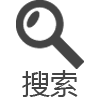
<style>
.page{position:relative;width:100px;height:100px;background:#ffffff}
.page>*{position:absolute;margin:0}
.t1{font:27.8px "MicrosoftYaHei";color:#444444}
</style>
<div class="page">
<p class="t1" style="left:22px;top:70px;width:56px;height:27px">搜索</p>
</div>
